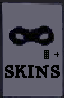
<style>
.page{position:relative;width:64px;height:98px;background:#646371}
.page>*{position:absolute;margin:0}
.t1{font:18px "BellMT";color:#000000;font-weight:bold}
</style>
<div class="page">
<p class="t1" style="left:5px;top:65px;width:55px;height:13px">SKINS</p>
</div>
